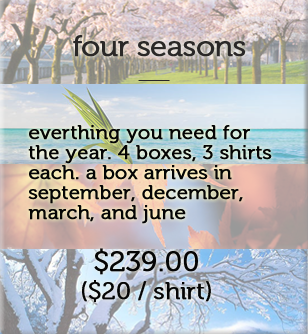
<style>
.page{position:relative;width:308px;height:334px}
.page>*{position:absolute;margin:0}
.t1{font:30px "Museo-300";letter-spacing:-0.025em;color:#2a2827;font-weight:bold}
.t2{font:20px/20px "Museo-300";color:#050505;font-weight:bold}
.t3{font:24px/28px "Museo-300";color:#050505;font-weight:bold}
.t4{font:28px/28px "Museo-300";color:#050505;font-weight:bold}
</style>
<div class="page">
<p class="t1" style="left:73px;top:35px;width:173px;height:22px">four seasons</p>
<p class="t2" style="left:28px;top:125px;width:244px;height:99px">everthing you need for the year. 4 boxes, 3 shirts each. a box arrives in   september, december, march, and june</p>
<p class="t3" style="left:82px;top:248px;width:129px;height:54px;text-align:center"><span class="t4">$239.00<br></span>($20 / shirt)</p>
</div>
